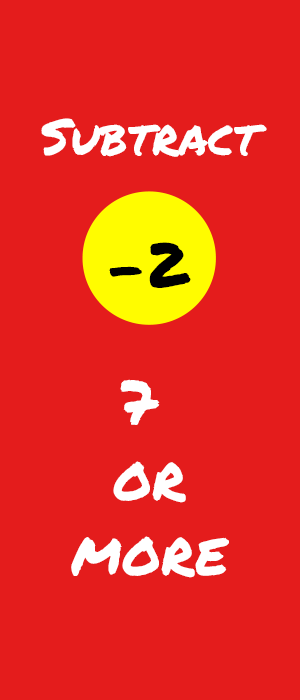
<style>
.page{position:relative;width:300px;height:700px;background:#e41c1c}
.page>*{position:absolute;margin:0}
.t1{font:62.5px "PermanentMarker";color:#ffffff}
.t2{font:50px "PermanentMarker";color:#ffffff}
.t3{font:100px "PermanentMarker";color:#ffffff}
.t4{font:62.5px "PermanentMarker";color:#000000}
</style>
<div class="page">
<p class="t1" style="left:41px;top:118px;width:226px;height:460px;text-align:center"><span class="t2">Subtract<br></span><span class="t3">2<br></span><br>7 <br>or<br>more</p>
<p class="t4" style="left:109px;top:242px;width:82px;height:46px">-2</p>
</div>
